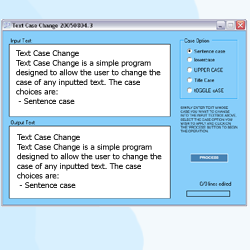
<style>
.page{position:relative;width:250px;height:250px;background:#ffffff}
.page>*{position:absolute;margin:0}
.t1{font:8px "Tahoma"}
</style>
<div class="page">
<p class="t1" style="left:16px;top:50px;width:145px;height:54px">Text Case Change<br>Text Case Change is a simple program designed to allow the user to change the case of any inputted text. The case choices are:<br> - Sentence case<br> - lowercase<br> - UPPERCASE<br> - Title Case<br> - tOGGLE cASE<br><br>Created by Craig Lotter, July 2005<br><br>*********************************<br><br>Project Details:</p>
<p class="t1" style="left:17px;top:134px;width:145px;height:54px">Text Case Change<br>Text Case Change is a simple program designed to allow the user to change the case of any inputted text. The case choices are:<br> - Sentence case<br> - lowercase<br> - UPPERCASE<br> - Title Case<br> - tOGGLE cASE<br><br>Created by Craig Lotter, July 2005<br><br>*********************************<br><br>Project Details:</p>
</div>
